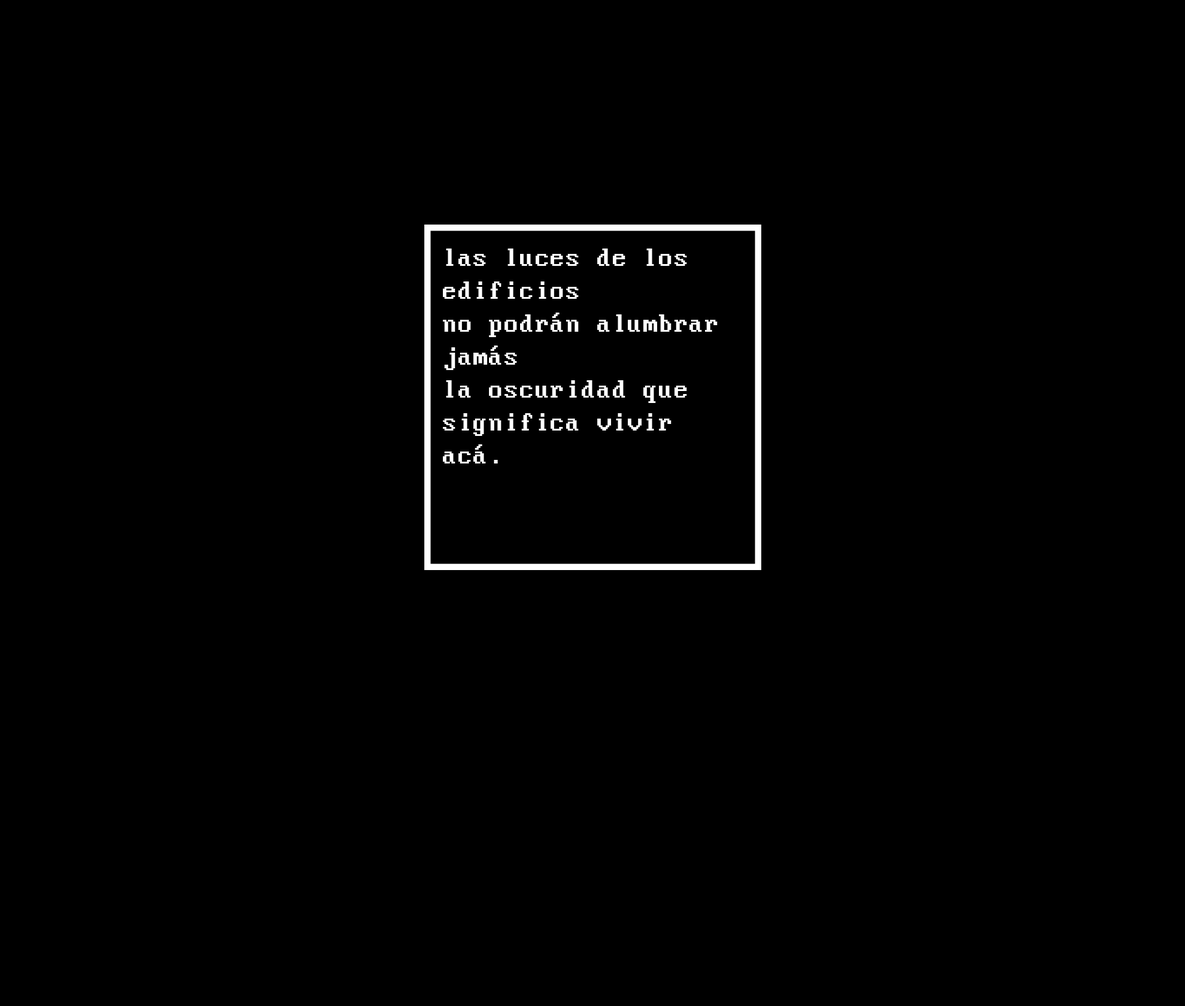
<style>
.page{position:relative;width:1185px;height:1006px;background:#000000}
.page>*{position:absolute;margin:0}
.t1{font:27.4px "MorePerfectDOSVGA";color:#ffffff}
</style>
<div class="page">
<p class="t1" style="left:443px;top:248px;width:275px;height:215px">las luces de los edificios<br>no podrán alumbrar jamás<br>la oscuridad que significa vivir acá.</p>
</div>
